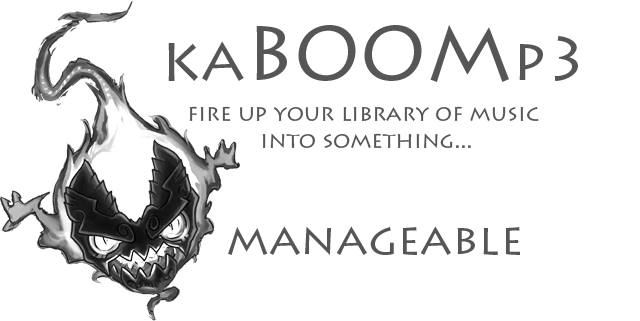
<style>
.page{position:relative;width:640px;height:321px;background:#ffffff}
.page>*{position:absolute;margin:0}
.t1{font:77.8px "LithosPro-Regular";color:#565656}
.t2{font:61.1px "LithosPro-Regular";color:#565656}
.t3{font:22.2px "LithosPro-Regular";color:#565656}
.t4{font:44.4px "LithosPro-Regular";color:#565656}
</style>
<div class="page">
<p class="t1" style="left:168px;top:25px;width:410px;height:57px"><span class="t2">ka</span>BOOM<span class="t2">p3</span></p>
<p class="t3" style="left:189px;top:106px;width:350px;height:42px;text-align:center">fire up your library of music<br> into something...</p>
<p class="t4" style="left:228px;top:226px;width:292px;height:29px">manageable</p>
</div>
